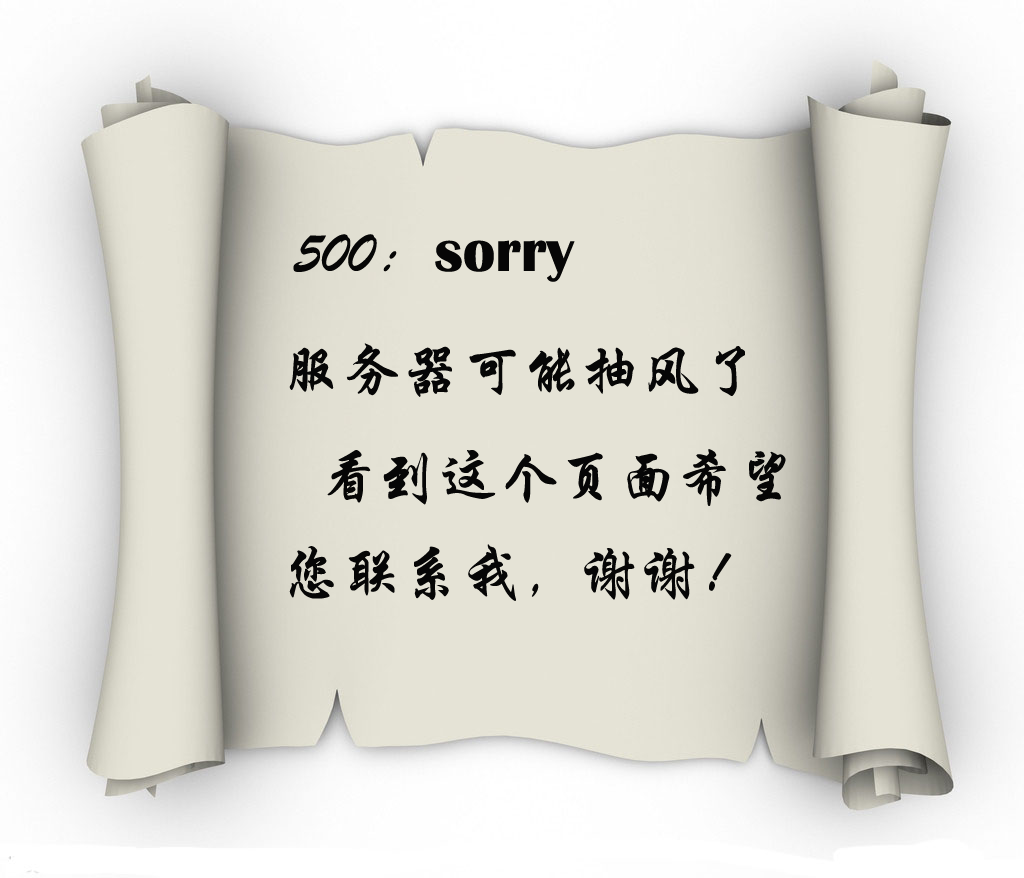
<style>
.page{position:relative;width:1024px;height:878px}
.page>*{position:absolute;margin:0}
.t1{font:60px "BritannicBold";color:#060606}
.t2{font:60px "STXingkai";color:#060606}
</style>
<div class="page">
<p class="t1" style="left:293px;top:234px;width:282px;height:48px"><span class="t2">500：</span>sorry</p>
<p class="t2" style="left:289px;top:343px;width:456px;height:54px">服务器可能抽风了</p>
<p class="t2" style="left:327px;top:449px;width:459px;height:57px">看到这个页面希望</p>
<p class="t2" style="left:289px;top:544px;width:443px;height:57px">您联系我，谢谢！</p>
</div>
